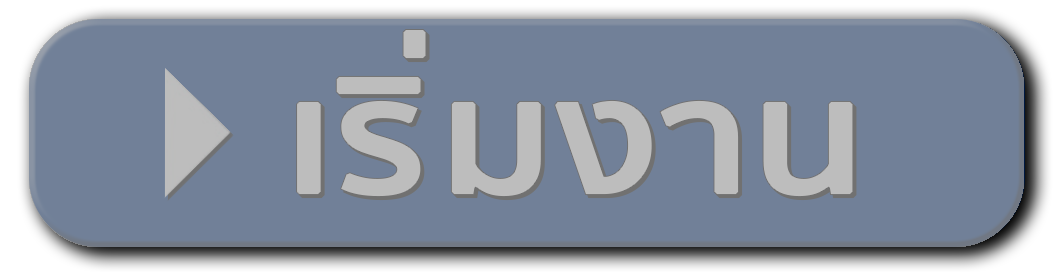
<style>
.page{position:relative;width:1055px;height:272px;background:#718098}
.page>*{position:absolute;margin:0}
.t1{font:158.1px "SukhumvitSet-SemiBold";color:#bdbdbd;font-weight:bold;scale:1.14 1}
</style>
<div class="page">
<p class="t1" style="left:296px;top:29px;width:558px;height:169px">เริ่มงาน</p>
</div>
